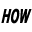
<style>
.page{position:relative;width:32px;height:32px;background:#ffffff}
.page>*{position:absolute;margin:0}
.t1{font:19.3px "HelveticaNeue-BoldItalic";letter-spacing:0.01em;color:#000000;font-weight:bold;font-style:italic;scale:0.56 1}
</style>
<div class="page">
<p class="t1" style="left:1px;top:8px;width:31px;height:16px">HOW</p>
</div>
